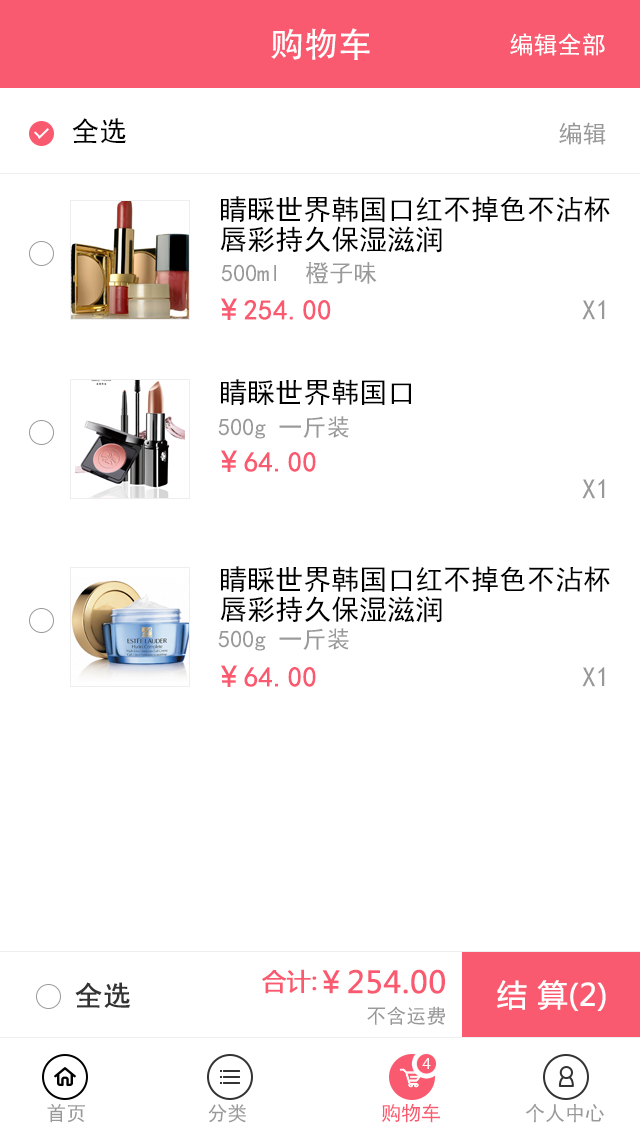
<style>
.page{position:relative;width:640px;height:1136px;background:#ffffff}
.page>*{position:absolute;margin:0}
.t1{font:34px "AdobeHeitiStd-Regular";color:#ffffff}
.t2{font:24px "SimHei";color:#ffffff}
.t3{font:28px "SimHei";color:#000000}
.t4{font:24px "SimHei";color:#999999}
.t5{font:28px/30px "SimHei";color:#000000}
.t6{font:28px "SimHei";color:#f95a70;font-weight:bold}
.t7{font:28px "MicrosoftYaHei";color:#f95a70;font-weight:bold}
.t8{font:28px "SimHei";color:#999999}
.t9{font:24px "MicrosoftYaHei";color:#f95a70;font-weight:bold}
.t10{font:30px "MicrosoftYaHei";color:#f95a70;font-weight:bold}
.t11{font:28px "SimHei";color:#333333;font-weight:bold}
.t12{font:30px "MicrosoftYaHei";color:#fffefe;font-weight:bold}
.t13{font:20px "SimHei";color:#999999}
.t14{font:16.8px "MyriadPro-Regular";color:#f8f8f8}
.t15{font:20px "SimHei";color:#f95a70}
</style>
<div class="page">
<p class="t1" style="left:271px;top:28px;width:99px;height:32px">购物车</p>
<p class="t2" style="left:510px;top:33px;width:95px;height:23px">编辑全部</p>
<p class="t3" style="left:72px;top:118px;width:54px;height:26px">全选</p>
<p class="t4" style="left:559px;top:122px;width:47px;height:23px">编辑</p>
<p class="t5" style="left:220px;top:196px;width:390px;height:57px">睛睬世界韩国口红不掉色不沾杯<br>唇彩持久保湿滋润</p>
<p class="t4" style="left:221px;top:262px;width:156px;height:22px">500ml  橙子味</p>
<p class="t6" style="left:221px;top:298px;width:110px;height:22px"><span class="t7">￥</span>254.00</p>
<p class="t8" style="left:582px;top:300px;width:23px;height:20px">X1</p>
<p class="t3" style="left:221px;top:379px;width:190px;height:27px">睛睬世界韩国口</p>
<p class="t4" style="left:218px;top:416px;width:131px;height:23px">500g 一斤装</p>
<p class="t6" style="left:221px;top:450px;width:95px;height:22px"><span class="t7">￥</span>64.00</p>
<p class="t8" style="left:582px;top:479px;width:23px;height:20px">X1</p>
<p class="t5" style="left:220px;top:566px;width:390px;height:57px">睛睬世界韩国口红不掉色不沾杯<br>唇彩持久保湿滋润</p>
<p class="t4" style="left:218px;top:628px;width:131px;height:23px">500g 一斤装</p>
<p class="t6" style="left:221px;top:665px;width:95px;height:22px"><span class="t7">￥</span>64.00</p>
<p class="t8" style="left:582px;top:667px;width:23px;height:20px">X1</p>
<p class="t9" style="left:262px;top:969px;width:55px;height:25px">合计:</p>
<p class="t10" style="left:322px;top:969px;width:123px;height:25px">￥254.00</p>
<p class="t11" style="left:75px;top:982px;width:56px;height:26px">全选</p>
<p class="t12" style="left:497px;top:980px;width:109px;height:31px">结 算(2)</p>
<p class="t13" style="left:367px;top:1006px;width:78px;height:19px">不含运费</p>
<p class="t14" style="left:422px;top:1058px;width:9px;height:11px">4</p>
<p class="t13" style="left:47px;top:1104px;width:38px;height:19px">首页</p>
<p class="t13" style="left:208px;top:1104px;width:38px;height:19px">分类</p>
<p class="t15" style="left:382px;top:1103px;width:58px;height:20px">购物车</p>
<p class="t13" style="left:525px;top:1103px;width:79px;height:20px">个人中心</p>
</div>
